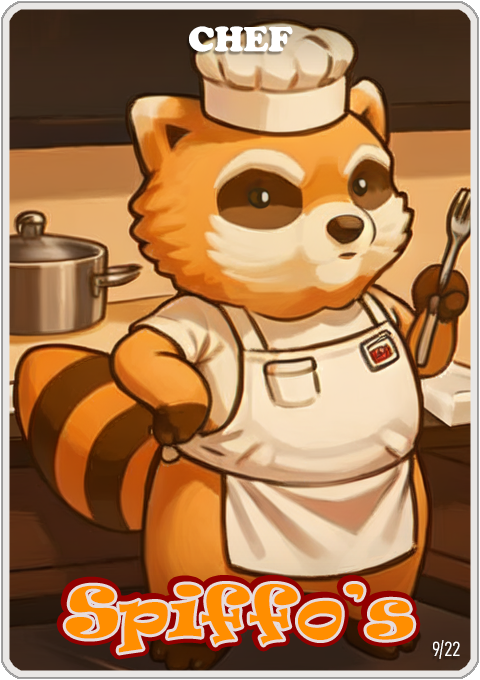
<style>
.page{position:relative;width:480px;height:680px}
.page>*{position:absolute;margin:0}
.t1{font:36px "CooperBlack";color:#ffffff}
.t2{font:65px "Ravie";color:#ff8e00}
.t3{font:20px "Bahnschrift-LightCondensed";color:#ffffff}
</style>
<div class="page">
<p class="t1" style="left:189px;top:26px;width:104px;height:26px">CHEF</p>
<p class="t2" style="left:65px;top:584px;width:349px;height:69px">Spiffo’s</p>
<p class="t3" style="left:433px;top:640px;width:27px;height:19px">9/22</p>
</div>
